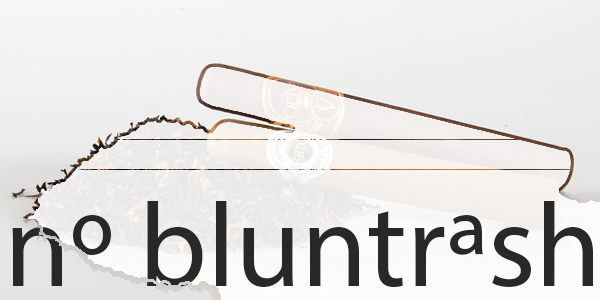
<style>
.page{position:relative;width:600px;height:300px}
.page>*{position:absolute;margin:0}
.t1{font:120px "MyriadPro-Regular";color:#282828}
</style>
<div class="page">
<p class="t1" style="left:12px;top:201px;width:581px;height:87px">no bluntrash</p>
</div>
